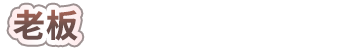
<style>
.page{position:relative;width:360px;height:50px;background:#ffffff}
.page>*{position:absolute;margin:0}
.t1{font:32px "SourceHanSansSC-Bold";color:#73534d;font-weight:bold}
</style>
<div class="page">
<p class="t1" style="left:13px;top:9px;width:65px;height:32px">老板</p>
</div>
